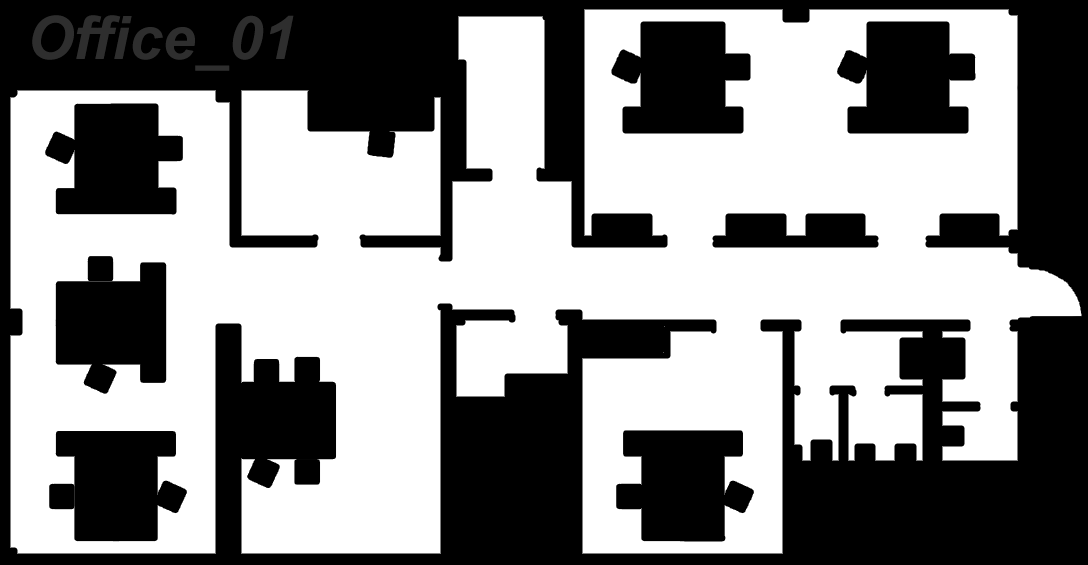
<style>
.page{position:relative;width:1088px;height:565px;background:#ffffff}
.page>*{position:absolute;margin:0}
.t1{font:60px "Arial-BoldItalicMT";color:#2e2e2e}
</style>
<div class="page">
<p class="t1" style="left:32px;top:15px;width:262px;height:56px">Office_01</p>
</div>
